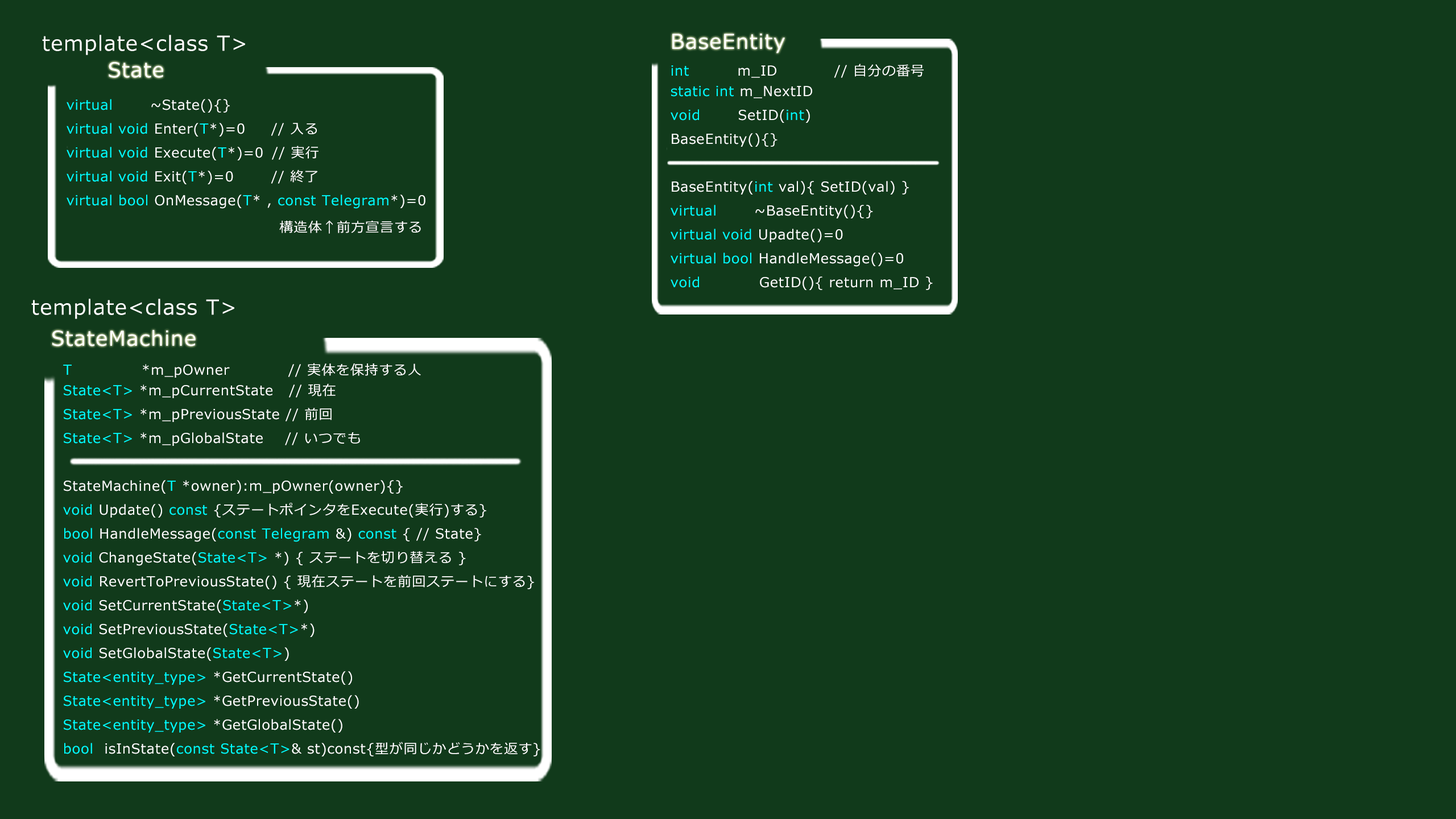
<style>
.page{position:relative;width:1456px;height:819px;background:#113a1b}
.page>*{position:absolute;margin:0}
.t1{font:20.5px "Meiryo";letter-spacing:0.05em;color:#ffffff}
.t2{font:13.6px "Meiryo";letter-spacing:0.05em;color:#ffffff}
.t3{font:13.6px/20.5px "Meiryo";letter-spacing:0.05em;color:#00ffff}
.t4{font:13.6px/20.5px "Meiryo";letter-spacing:0.05em;color:#ffffff}
.t5{font:13.6px "Meiryo";letter-spacing:0.05em;color:#00ffff}
</style>
<div class="page">
<p class="t1" style="left:42px;top:35px;width:203px;height:20px">template&lt;class T&gt;</p>
<p class="t1" style="left:672px;top:34px;width:113px;height:19px">BaseEntity</p>
<p class="t1" style="left:109px;top:62px;width:54px;height:16px">State</p>
<p class="t2" style="left:671px;top:64px;width:262px;height:226px"><span class="t3">int         </span><span class="t4">m_ID   // 自分の番号<br></span><span class="t5">static int</span> m_NextID<br><span class="t5">void</span>       SetID(<span class="t5">int</span>)<br>BaseEntity(){}<br><br>BaseEntity(<span class="t5">int</span> val){ SetID(val) }<br><span class="t5">virtual</span>       ~BaseEntity(){}<br><span class="t5">virtual void</span> Upadte()=0<br><span class="t5">virtual bool</span> HandleMessage()=0<br><span class="t5">void</span>           GetID(){ return m_ID }</p>
<p class="t5" style="left:67px;top:99px;width:358px;height:110px">virtual<span class="t2">       ~State(){}<br></span>virtual void<span class="t2"> Enter(</span>T<span class="t2">*)=0  // 入る<br></span>virtual void<span class="t2"> Execute(</span>T<span class="t2">*)=0 // 実行<br></span>virtual void<span class="t2"> Exit(</span>T<span class="t2">*)=0  // 終了<br></span>virtual bool<span class="t2"> OnMessage(</span>T<span class="t2">* , </span>const Telegram<span class="t2">*)=0</span></p>
<p class="t2" style="left:279px;top:220px;width:142px;height:14px">構造体↑前方宣言する</p>
<p class="t1" style="left:31px;top:299px;width:203px;height:20px">template&lt;class T&gt;</p>
<p class="t1" style="left:52px;top:330px;width:144px;height:16px">StateMachine</p>
<p class="t2" style="left:63px;top:363px;width:477px;height:393px"><span class="t3">T             </span><span class="t4">*m_pOwner   // 実体を保持する人<br></span><span class="t5">State&lt;T&gt;</span> *m_pCurrentState // 現在<br><span class="t5">State&lt;T&gt;</span> *m_pPreviousState // 前回<br><span class="t5">State&lt;T&gt; </span>*m_pGlobalState    // いつでも<br><br>StateMachine(<span class="t5">T</span> *owner):m_pOwner(owner){}<br><span class="t5">void</span> Update() <span class="t5">const </span>{ステートポインタをExecute(実行)する}<br><span class="t5">bool</span> HandleMessage(<span class="t5">const Telegram </span>&amp;) <span class="t5">const </span>{ // State}<br><span class="t5">void</span> ChangeState(<span class="t5">State&lt;T&gt;</span> *) { ステートを切り替える }<br><span class="t5">void</span> RevertToPreviousState() { 現在ステートを前回ステートにする}<br><span class="t5">void</span> SetCurrentState(<span class="t5">State&lt;T&gt;</span>*)<br><span class="t5">void</span> SetPreviousState(<span class="t5">State&lt;T&gt;</span>*)<br><span class="t5">void</span> SetGlobalState(<span class="t5">State&lt;T&gt;</span>)<br><span class="t5">State&lt;entity_type&gt;</span> *GetCurrentState()<br><span class="t5">State&lt;entity_type&gt;</span> *GetPreviousState()<br><span class="t5">State&lt;entity_type&gt;</span> *GetGlobalState()<br><span class="t5">bool</span>  isInState(<span class="t5">const State&lt;T&gt;</span>&amp; st)const{型が同じかどうかを返す}</p>
</div>
